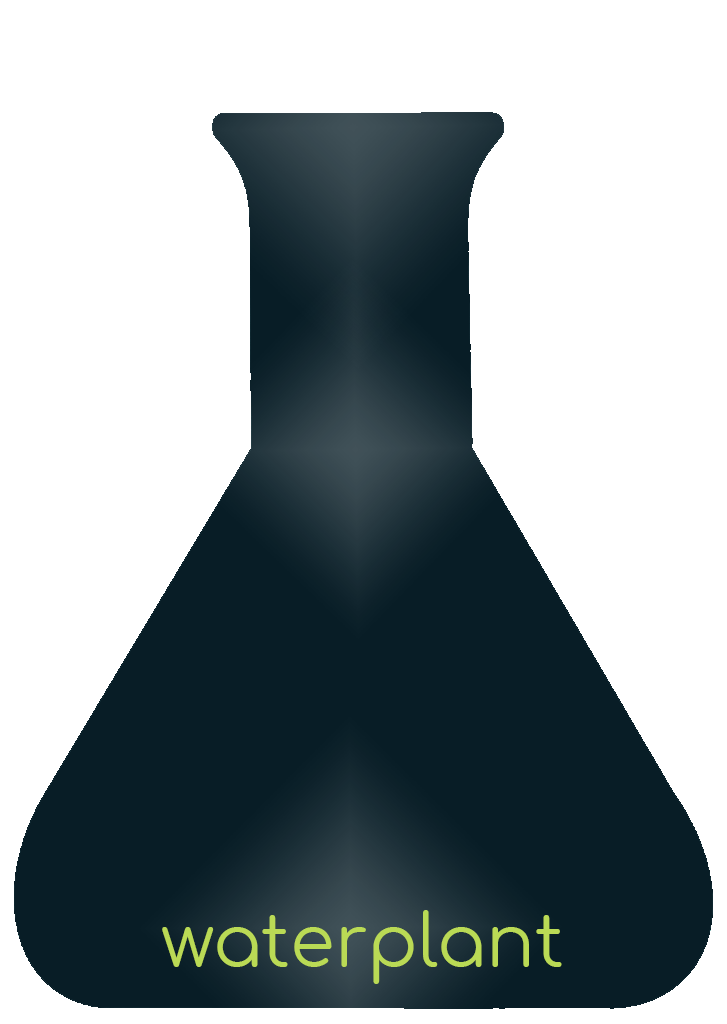
<style>
.page{position:relative;width:727px;height:1024px;background:#ffffff}
.page>*{position:absolute;margin:0}
.t1{font:72px "Comfortaa-Regular";color:#bada55}
</style>
<div class="page">
<p class="t1" style="left:162px;top:910px;width:400px;height:74px">waterplant</p>
</div>
